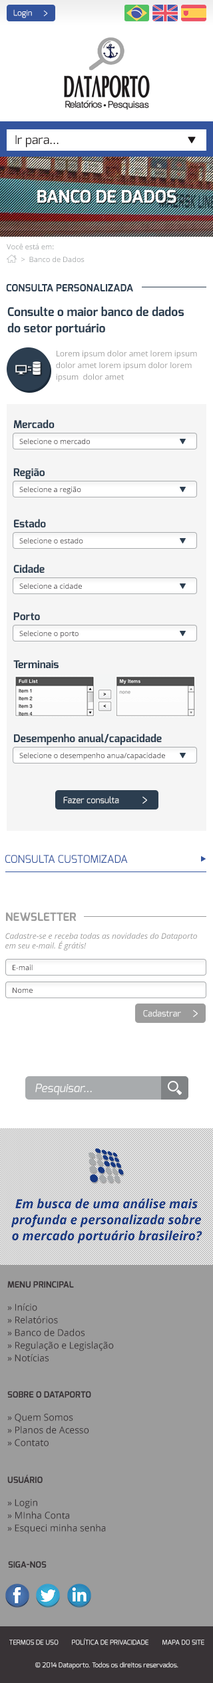
<style>
.page{position:relative;width:213px;height:1683px;background:#ffffff}
.page>*{position:absolute;margin:0}
.t1{font:8px "Exo-Regular";color:#ffffff}
.t2{font:12px "Exo-Regular";color:#1b1718}
.t3{font:17.3px "Exo-Bold";color:#ffffff;text-transform:uppercase}
.t4{font:7.3px "OpenSans";color:#a8abad}
.t5{font:10px "Exo-Bold";color:#2c3e50}
.t6{font:12px/16.3px "Exo-Bold";color:#2c3e50}
.t7{font:8px/11.6px "OpenSans";color:#9c9c9c}
.t8{font:10.7px "Exo-Bold";color:#2c3e50}
.t9{font:7.3px "OpenSans";color:#444043}
.t10{font:8.7px "Exo-Regular";color:#ffffff}
.t11{font:10.7px "Exo-Regular";color:#33549e}
.t12{font:11.3px "Exo-Bold";color:#9c9c9c}
.t13{font:8px "OpenSans-Italic";color:#9c9c9c}
.t14{font:11.3px "Exo-Italic";color:#ffffff}
.t15{font:12.7px/16px "OpenSans-BoldItalic";color:#173883}
.t16{font:9.3px/12.7px "OpenSans";color:#383336}
.t17{font:8.7px "Exo-Bold";color:#383336;text-transform:uppercase}
.t18{font:6.7px "Exo-Regular";color:#ffffff;text-transform:uppercase}
.t19{font:6.7px "Exo-Regular";color:#ffffff}
</style>
<div class="page">
<p class="t1" style="left:13px;top:9px;width:19px;height:9px">Login</p>
<p class="t2" style="left:15px;top:135px;width:44px;height:12px">Ir para...</p>
<p class="t3" style="left:37px;top:189px;width:140px;height:14px">BANCO DE DADOS</p>
<p class="t4" style="left:7px;top:243px;width:47px;height:6px">Você está em:</p>
<p class="t4" style="left:21px;top:256px;width:64px;height:6px">&gt;  Banco de Dados</p>
<p class="t5" style="left:6px;top:284px;width:127px;height:7px">CONSULTA PERSONALIZADA</p>
<p class="t6" style="left:7px;top:306px;width:177px;height:30px">Consulte o maior banco de dados<br>do setor portuário</p>
<p class="t7" style="left:56px;top:350px;width:141px;height:32px">Lorem ipsum dolor amet lorem ipsum dolor amet lorem ipsum dolor lorem ipsum  dolor amet</p>
<p class="t8" style="left:13px;top:419px;width:42px;height:9px">Mercado</p>
<p class="t9" style="left:19px;top:438px;width:71px;height:6px">Selecione o mercado</p>
<p class="t8" style="left:13px;top:468px;width:32px;height:11px">Região</p>
<p class="t9" style="left:19px;top:486px;width:62px;height:8px">Selecione a região</p>
<p class="t8" style="left:14px;top:519px;width:32px;height:8px">Estado</p>
<p class="t9" style="left:19px;top:537px;width:64px;height:6px">Selecione o estado</p>
<p class="t8" style="left:13px;top:564px;width:32px;height:9px">Cidade</p>
<p class="t9" style="left:19px;top:583px;width:63px;height:6px">Selecione a cidade</p>
<p class="t8" style="left:13px;top:612px;width:27px;height:8px">Porto</p>
<p class="t9" style="left:19px;top:630px;width:60px;height:8px">Selecione o porto</p>
<p class="t8" style="left:13px;top:660px;width:46px;height:8px">Terminais</p>
<p class="t8" style="left:14px;top:733px;width:148px;height:12px">Desempenho anual/capacidade</p>
<p class="t9" style="left:19px;top:752px;width:146px;height:8px">Selecione o desempenho anua/capacidade</p>
<p class="t10" style="left:63px;top:796px;width:56px;height:7px">Fazer consulta</p>
<p class="t11" style="left:5px;top:855px;width:123px;height:8px">CONSULTA CUSTOMIZADA</p>
<p class="t12" style="left:6px;top:912px;width:71px;height:9px">NEWSLETTER</p>
<p class="t13" style="left:5px;top:933px;width:192px;height:18px">Cadastre-se e receba todas as novidades do Dataporto<br>em seu e-mail. É grátis!</p>
<p class="t9" style="left:13px;top:964px;width:20px;height:6px">E-mail</p>
<p class="t9" style="left:13px;top:987px;width:20px;height:6px">Nome</p>
<p class="t10" style="left:143px;top:1009px;width:38px;height:8px">Cadastrar</p>
<p class="t14" style="left:35px;top:1083px;width:57px;height:12px">Pesquisar...</p>
<p class="t15" style="left:11px;top:1198px;width:192px;height:45px;text-align:center">Em busca de uma análise mais<br>profunda e personalizada sobre<br>o mercado portuário brasileiro?</p>
<p class="t16" style="left:7px;top:1281px;width:107px;height:80px"><span class="t17">MENU PRINCIPAL<br><br></span>» Início<br>» Relatórios<br>» Banco de Dados<br>» Regulação e Legislação<br>» Notícias</p>
<p class="t16" style="left:7px;top:1391px;width:84px;height:55px"><span class="t17">SOBRE O DATAPORTO<br><br></span>» Quem Somos<br>» Planos de Acesso<br>» Contato</p>
<p class="t16" style="left:7px;top:1474px;width:99px;height:59px"><span class="t17">usuário<br><br></span>» Login<br>» MInha Conta<br>» Esqueci minha senha</p>
<p class="t17" style="left:8px;top:1561px;width:39px;height:6px">SIGA-NOS</p>
<p class="t18" style="left:9px;top:1638px;width:196px;height:7px">Termos de Uso        Política de Privacidade        Mapa do Site</p>
<p class="t19" style="left:35px;top:1661px;width:144px;height:8px">© 2014 Dataporto. Todos os direitos reservados.</p>
</div>
